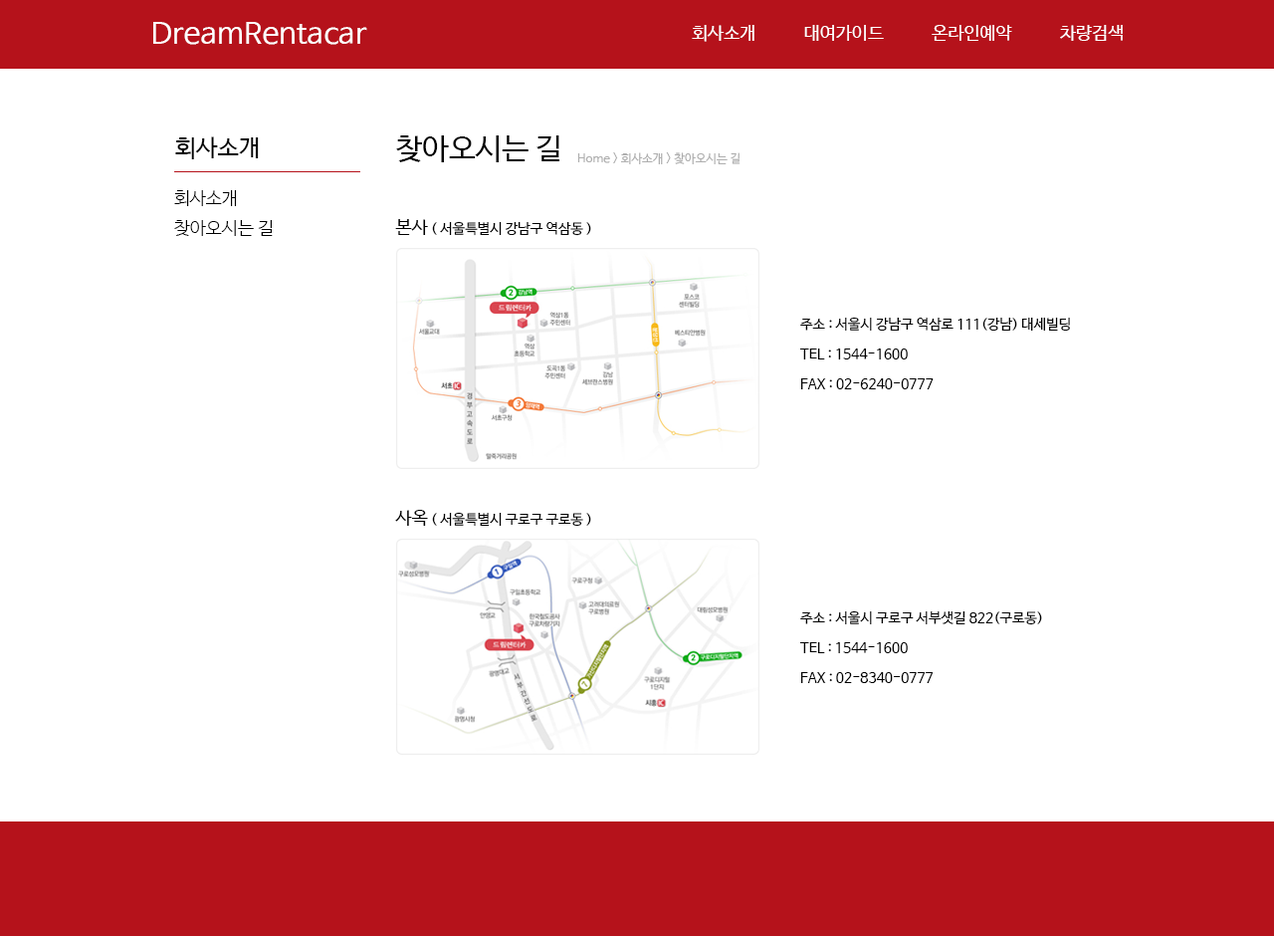
<style>
.page{position:relative;width:1274px;height:936px;background:#ffffff}
.page>*{position:absolute;margin:0}
.t1{font:29.9px "NanumBarunGothic";color:#ffffff}
.t2{font:17.9px "NanumBarunGothic";color:#ffffff}
.t3{font:23.9px "NanumBarunGothic";color:#000000}
.t4{font:29.9px "NanumBarunGothic";color:#000000}
.t5{font:11.9px "NanumBarunGothic";color:#afafaf}
.t6{font:17.9px/29.9px "NanumBarunGothicLight";color:#000000}
.t7{font:13.9px "NanumBarunGothic";color:#000000}
.t8{font:17.9px "NanumBarunGothic";color:#000000}
.t9{font:13.9px/29.9px "NanumBarunGothic";color:#000000}
</style>
<div class="page">
<p class="t1" style="left:153px;top:22px;width:214px;height:23px">DreamRentacar</p>
<p class="t2" style="left:692px;top:25px;width:431px;height:17px">회사소개            대여가이드            온라인예약            차량검색</p>
<p class="t3" style="left:175px;top:136px;width:84px;height:23px">회사소개</p>
<p class="t4" style="left:396px;top:135px;width:163px;height:27px">찾아오시는 길</p>
<p class="t5" style="left:577px;top:152px;width:164px;height:12px">Home &gt; 회사소개 &gt; 찾아오시는 길</p>
<p class="t6" style="left:174px;top:190px;width:99px;height:46px">회사소개<br>찾아오시는 길</p>
<p class="t7" style="left:395px;top:219px;width:196px;height:17px"><span class="t8">본사</span> ( 서울특별시 강남구 역삼동 )</p>
<p class="t9" style="left:800px;top:317px;width:270px;height:72px">주소 : 서울시 강남구 역삼로 111(강남) 대세빌딩<br>TEL : 1544-1600<br>FAX : 02-6240-0777</p>
<p class="t7" style="left:395px;top:510px;width:196px;height:17px"><span class="t8">사옥</span> ( 서울특별시 구로구 구로동 )</p>
<p class="t9" style="left:800px;top:610px;width:242px;height:73px">주소 : 서울시 구로구 서부샛길 822(구로동)<br>TEL : 1544-1600<br>FAX : 02-8340-0777</p>
</div>
